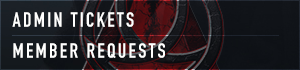
<style>
.page{position:relative;width:300px;height:70px}
.page>*{position:absolute;margin:0}
.t1{font:20.2px "DINCondensed-Bold";letter-spacing:0.115em;color:#fffffe;text-transform:uppercase}
</style>
<div class="page">
<p class="t1" style="left:12px;top:12px;width:122px;height:15px">ADMIN TICKETS</p>
<p class="t1" style="left:13px;top:43px;width:152px;height:15px">mEMBER REQUESTS</p>
</div>
